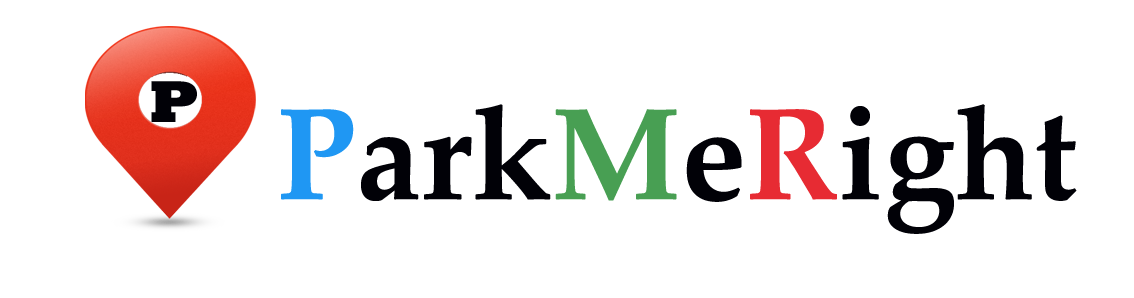
<style>
.page{position:relative;width:1134px;height:298px;background:#ffffff}
.page>*{position:absolute;margin:0}
.t1{font:60px "Rockwell-ExtraBold";color:#010107}
.t2{font:130px "PalatinoLinotype-Bold";color:#010107}
.t3{font:130px "PalatinoLinotype-Bold";color:#1f97f3}
.t4{font:130px "PalatinoLinotype-Bold";color:#489f53}
.t5{font:130px "PalatinoLinotype-Bold";color:#e72b33}
</style>
<div class="page">
<p class="t1" style="left:151px;top:81px;width:46px;height:41px">P</p>
<p class="t2" style="left:281px;top:104px;width:796px;height:130px"><span class="t3">P</span>ark<span class="t4">M</span>e<span class="t5">R</span>ight</p>
</div>
